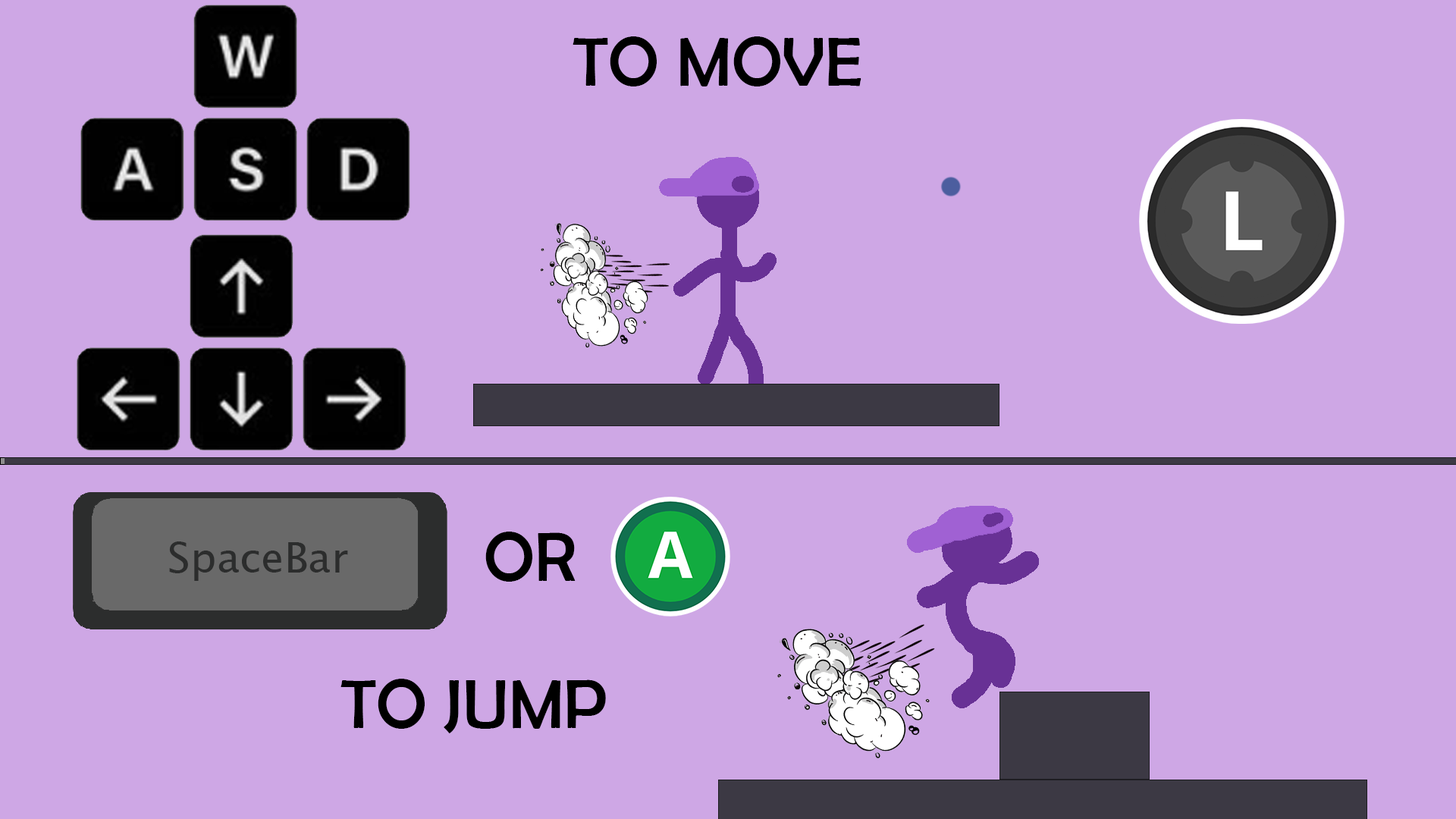
<style>
.page{position:relative;width:1456px;height:819px;background:#cea7e5}
.page>*{position:absolute;margin:0}
.t1{font:69.8px "BerlinSansFB-Reg";color:#000000}
.t2{font:41.7px "LucidaSansUnicode";color:#2c2d2d}
</style>
<div class="page">
<p class="t1" style="left:573px;top:36px;width:288px;height:50px">TO MOVE</p>
<p class="t1" style="left:485px;top:532px;width:91px;height:50px">OR</p>
<p class="t2" style="left:169px;top:541px;width:179px;height:40px">SpaceBar</p>
<p class="t1" style="left:340px;top:679px;width:266px;height:54px">TO JUMP</p>
</div>
